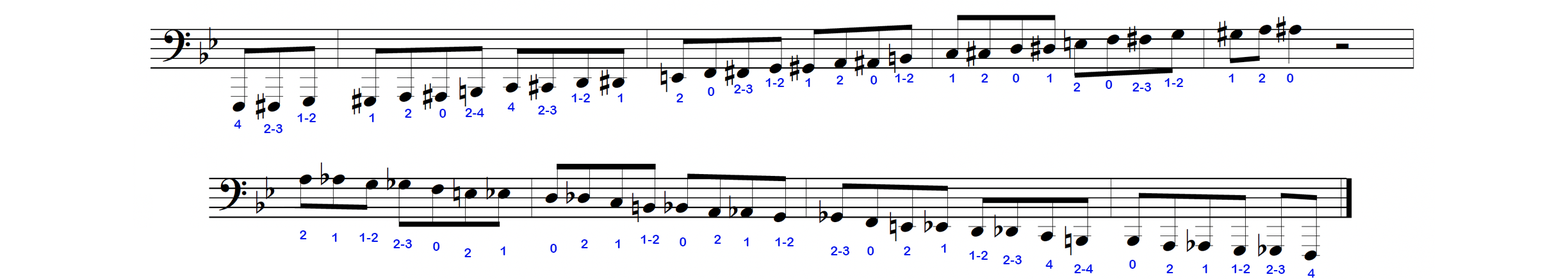
<style>
.page{position:relative;width:1568px;height:279px;background:#ffffff}
.page>*{position:absolute;margin:0}
.t1{font:12.8px "ArialRoundedMTBold";color:#0417ec}
</style>
<div class="page">
<p class="t1" style="left:837px;top:76px;width:7px;height:9px">2</p>
<p class="t1" style="left:870px;top:76px;width:8px;height:9px">0</p>
<p class="t1" style="left:895px;top:74px;width:19px;height:9px">1-2</p>
<p class="t1" style="left:949px;top:74px;width:5px;height:9px">1</p>
<p class="t1" style="left:981px;top:74px;width:7px;height:9px">2</p>
<p class="t1" style="left:1013px;top:74px;width:7px;height:9px">0</p>
<p class="t1" style="left:1047px;top:74px;width:5px;height:9px">1</p>
<p class="t1" style="left:1229px;top:74px;width:5px;height:9px">1</p>
<p class="t1" style="left:1259px;top:74px;width:7px;height:9px">2</p>
<p class="t1" style="left:1287px;top:74px;width:7px;height:9px">0</p>
<p class="t1" style="left:708px;top:87px;width:7px;height:9px">0</p>
<p class="t1" style="left:734px;top:85px;width:19px;height:9px">2-3</p>
<p class="t1" style="left:765px;top:78px;width:20px;height:9px">1-2</p>
<p class="t1" style="left:805px;top:78px;width:5px;height:9px">1</p>
<p class="t1" style="left:1074px;top:83px;width:7px;height:9px">2</p>
<p class="t1" style="left:1106px;top:80px;width:7px;height:9px">0</p>
<p class="t1" style="left:1132px;top:83px;width:19px;height:9px">2-3</p>
<p class="t1" style="left:1164px;top:78px;width:20px;height:9px">1-2</p>
<p class="t1" style="left:571px;top:94px;width:20px;height:8px">1-2</p>
<p class="t1" style="left:617px;top:94px;width:6px;height:8px">1</p>
<p class="t1" style="left:676px;top:94px;width:7px;height:8px">2</p>
<p class="t1" style="left:297px;top:113px;width:19px;height:9px">1-2</p>
<p class="t1" style="left:369px;top:113px;width:5px;height:9px">1</p>
<p class="t1" style="left:405px;top:109px;width:7px;height:9px">2</p>
<p class="t1" style="left:439px;top:109px;width:7px;height:9px">0</p>
<p class="t1" style="left:465px;top:108px;width:19px;height:9px">2-4</p>
<p class="t1" style="left:507px;top:102px;width:8px;height:9px">4</p>
<p class="t1" style="left:538px;top:106px;width:19px;height:9px">2-3</p>
<p class="t1" style="left:234px;top:120px;width:7px;height:9px">4</p>
<p class="t1" style="left:264px;top:124px;width:18px;height:9px">2-3</p>
<p class="t1" style="left:300px;top:231px;width:7px;height:9px">2</p>
<p class="t1" style="left:332px;top:233px;width:5px;height:9px">1</p>
<p class="t1" style="left:359px;top:233px;width:20px;height:9px">1-2</p>
<p class="t1" style="left:393px;top:240px;width:19px;height:9px">2-3</p>
<p class="t1" style="left:433px;top:242px;width:7px;height:9px">0</p>
<p class="t1" style="left:550px;top:244px;width:7px;height:9px">0</p>
<p class="t1" style="left:581px;top:240px;width:7px;height:9px">2</p>
<p class="t1" style="left:615px;top:240px;width:5px;height:9px">1</p>
<p class="t1" style="left:641px;top:235px;width:19px;height:9px">1-2</p>
<p class="t1" style="left:680px;top:238px;width:7px;height:9px">0</p>
<p class="t1" style="left:714px;top:235px;width:7px;height:9px">2</p>
<p class="t1" style="left:744px;top:238px;width:5px;height:9px">1</p>
<p class="t1" style="left:775px;top:238px;width:19px;height:9px">1-2</p>
<p class="t1" style="left:941px;top:244px;width:5px;height:9px">1</p>
<p class="t1" style="left:464px;top:249px;width:7px;height:8px">2</p>
<p class="t1" style="left:500px;top:247px;width:5px;height:9px">1</p>
<p class="t1" style="left:831px;top:247px;width:18px;height:9px">2-3</p>
<p class="t1" style="left:867px;top:247px;width:7px;height:9px">0</p>
<p class="t1" style="left:904px;top:247px;width:7px;height:9px">2</p>
<p class="t1" style="left:969px;top:251px;width:19px;height:9px">1-2</p>
<p class="t1" style="left:1003px;top:256px;width:19px;height:9px">2-3</p>
<p class="t1" style="left:1045px;top:260px;width:8px;height:9px">4</p>
<p class="t1" style="left:1074px;top:265px;width:19px;height:9px">2-4</p>
<p class="t1" style="left:1129px;top:260px;width:7px;height:9px">0</p>
<p class="t1" style="left:1166px;top:265px;width:7px;height:9px">2</p>
<p class="t1" style="left:1202px;top:265px;width:5px;height:9px">1</p>
<p class="t1" style="left:1232px;top:265px;width:18px;height:9px">1-2</p>
<p class="t1" style="left:1266px;top:265px;width:19px;height:9px">2-3</p>
<p class="t1" style="left:1307px;top:269px;width:8px;height:9px">4</p>
</div>
